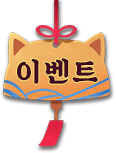
<style>
.page{position:relative;width:116px;height:153px;background:#ffffff}
.page>*{position:absolute;margin:0}
.t1{font:28.4px "SDKukdetopokki-bBd";letter-spacing:0.08em;color:#480925}
</style>
<div class="page">
<p class="t1" style="left:17px;top:58px;width:81px;height:26px">이벤트</p>
</div>
